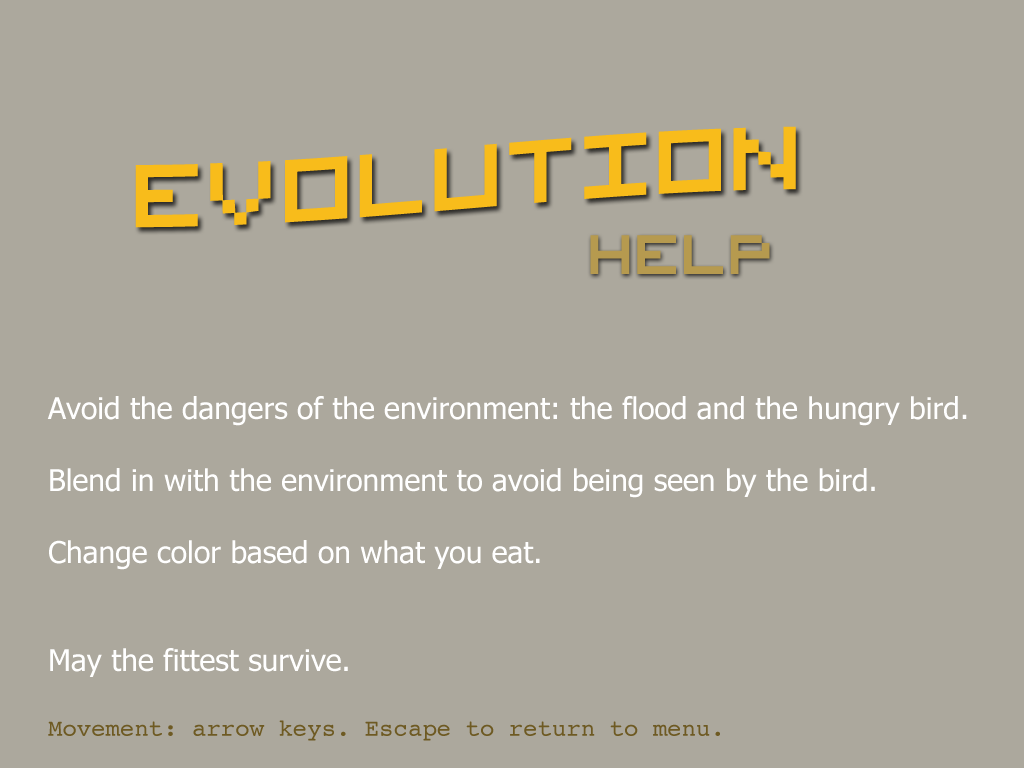
<style>
.page{position:relative;width:1024px;height:768px;background:#aca89d}
.page>*{position:absolute;margin:0}
.t1{font:100px "VisitorTT2BRK";color:#b69a4f}
.t2{font:30px "Tahoma";color:#ffffff}
.t3{font:24px "Courier";color:#6e5a23}
</style>
<div class="page">
<p class="t1" style="left:590px;top:235px;width:180px;height:39px">HELP</p>
<p class="t2" style="left:47px;top:396px;width:920px;height:345px">Avoid the dangers of the environment: the flood and the hungry bird.<br><br>Blend in with the environment to avoid being seen by the bird.<br><br>Change color based on what you eat.<br><br><br>May the fittest survive.<br><br><span class="t3">Movement: arrow keys. Escape to return to menu.</span></p>
</div>
